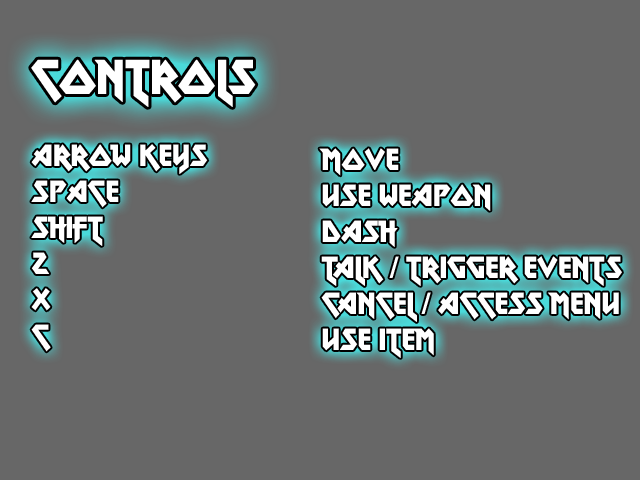
<style>
.page{position:relative;width:640px;height:480px;background:#676767}
.page>*{position:absolute;margin:0}
.t1{font:48px "MetalLord-Regular";color:#ffffff}
.t2{font:30px "MetalLord-Regular";color:#ffffff}
</style>
<div class="page">
<p class="t1" style="left:31px;top:59px;width:225px;height:48px">Controls</p>
<p class="t2" style="left:31px;top:144px;width:177px;height:208px">Arrow Keys<br>Space<br>Shift<br>Z<br>X<br>C</p>
<p class="t2" style="left:319px;top:148px;width:303px;height:210px">Move<br>Use Weapon<br>Dash<br>Talk / Trigger Events<br>Cancel / Access menu<br>Use item</p>
</div>
